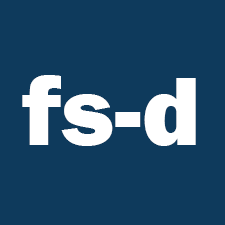
<style>
.page{position:relative;width:225px;height:225px;background:#0e3a5c}
.page>*{position:absolute;margin:0}
.t1{font:100px "FranklinGothic-Heavy";color:#ffffff}
</style>
<div class="page">
<p class="t1" style="left:22px;top:75px;width:174px;height:71px">fs-d</p>
</div>
